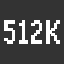
<style>
.page{position:relative;width:64px;height:64px;background:#333333}
.page>*{position:absolute;margin:0}
.t1{font:40.9px "Glasstown-NBP";letter-spacing:0.005em;color:#ffffff;font-weight:bold}
</style>
<div class="page">
<p class="t1" style="left:4px;top:20px;width:56px;height:24px">512K</p>
</div>
